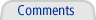
<style>
.page{position:relative;width:96px;height:20px;background:#e6e6e6}
.page>*{position:absolute;margin:0}
.t1{font:14px "Frutiger-Cn";color:#003399}
</style>
<div class="page">
<p class="t1" style="left:18px;top:5px;width:56px;height:11px">Comments</p>
</div>
